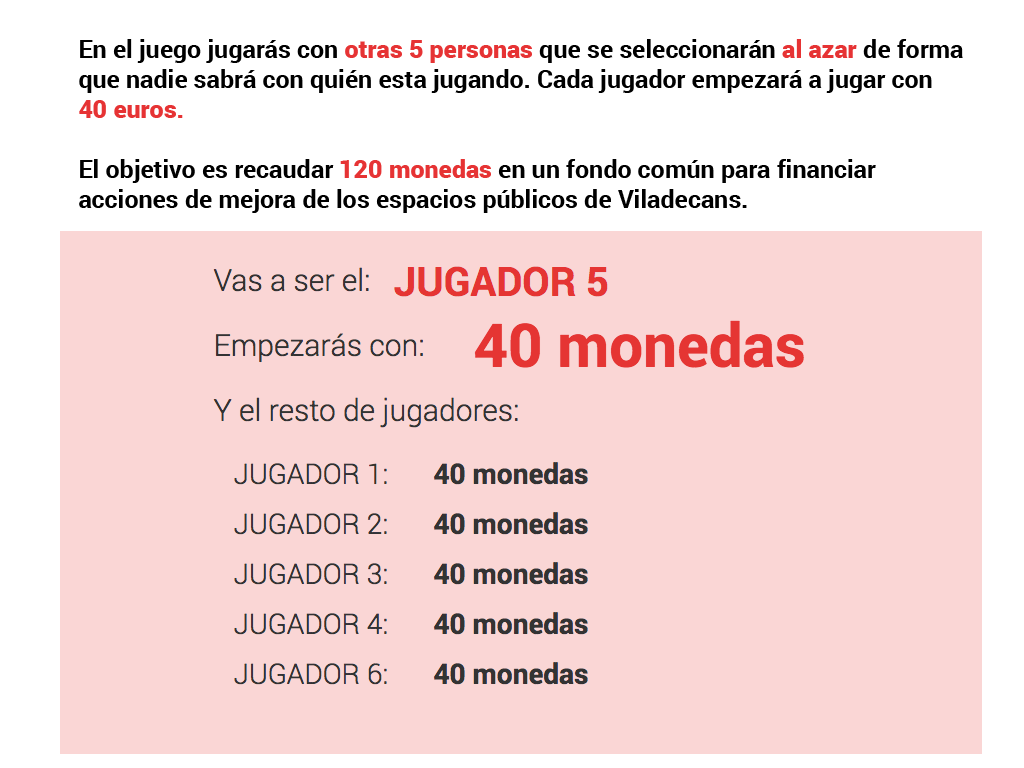
<style>
.page{position:relative;width:1024px;height:768px;background:#fad6d5}
.page>*{position:absolute;margin:0}
.t1{font:25px "Roboto-Bold";color:#000000}
.t2{font:25px "Roboto-Black";color:#e63334}
</style>
<div class="page">
<p class="t1" style="left:79px;top:39px;width:884px;height:174px">En el juego jugarás con <span class="t2">otras 5 personas</span> que se seleccionarán <span class="t2">al azar </span>de forma <br>que nadie sabrá con quién esta jugando. Cada jugador empezará a jugar con <br><span class="t2">40 euros.<br></span><br>El objetivo es recaudar <span class="t2">120 monedas</span> en un fondo común para financiar<br>acciones de mejora de los espacios públicos de Viladecans.</p>
</div>
